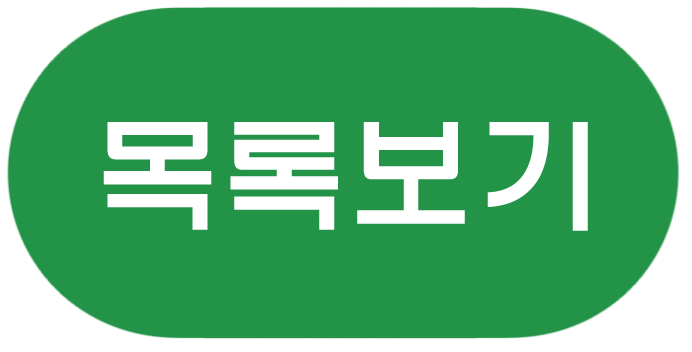
<style>
.page{position:relative;width:692px;height:352px;background:#239347}
.page>*{position:absolute;margin:0}
.t1{font:130px "HYwulM";letter-spacing:-0.025em;color:#ffffff}
</style>
<div class="page">
<p class="t1" style="left:103px;top:122px;width:485px;height:109px">목록보기</p>
</div>
